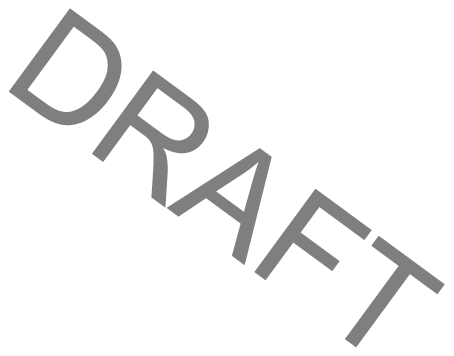
<style>
.page{position:relative;width:454px;height:356px;background:#ffffff}
.page>*{position:absolute;margin:0}
.t1{font:144px "ArialMT";color:#7f7f7f}
</style>
<div class="page">
<p class="t1" style="left:8px;top:8px;width:437px;height:340px;rotate:36deg">DRAFT</p>
</div>
